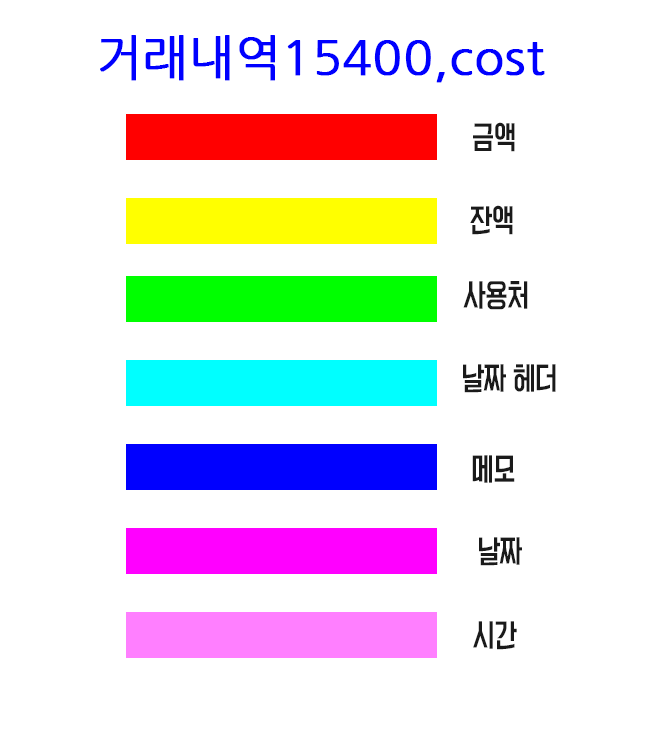
<style>
.page{position:relative;width:660px;height:749px;background:#ffffff}
.page>*{position:absolute;margin:0}
.t1{font:48px "NanumGothic";color:#0000ff;font-weight:bold}
.t2{font:29px "KoreanYNSJG4-R";color:#1a1a1a;scale:0.8 1}
</style>
<div class="page">
<p class="t1" style="left:100px;top:35px;width:445px;height:48px">거래내역15400,cost</p>
<p class="t2" style="left:473px;top:122px;width:42px;height:30px">금액</p>
<p class="t2" style="left:470px;top:205px;width:43px;height:30px">잔액</p>
<p class="t2" style="left:463px;top:281px;width:65px;height:29px">사용처</p>
<p class="t2" style="left:463px;top:364px;width:93px;height:29px">날짜 헤더</p>
<p class="t2" style="left:472px;top:455px;width:43px;height:28px">메모</p>
<p class="t2" style="left:479px;top:537px;width:43px;height:29px">날짜</p>
<p class="t2" style="left:473px;top:621px;width:44px;height:29px">시간</p>
</div>
